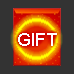
<style>
.page{position:relative;width:74px;height:74px;background:#333333}
.page>*{position:absolute;margin:0}
.t1{font:18px "ArialMT";color:#ffffff}
</style>
<div class="page">
<p class="t1" style="left:18px;top:33px;width:39px;height:13px">GIFT</p>
</div>
